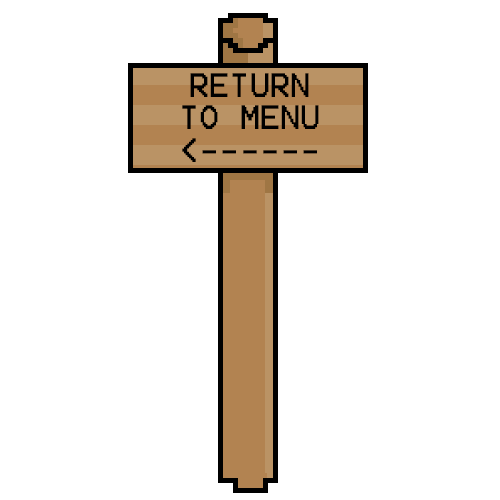
<style>
.page{position:relative;width:500px;height:500px;background:#ffffff}
.page>*{position:absolute;margin:0}
.t1{font:27px "Terminal";color:#000000}
</style>
<div class="page">
<p class="t1" style="left:182px;top:73px;width:137px;height:89px;text-align:center">RETURN <br>TO MENU<br>&lt;------</p>
</div>
